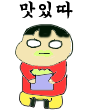
<style>
.page{position:relative;width:90px;height:110px;background:#ffffff}
.page>*{position:absolute;margin:0}
.t1{font:18px "H2gsrB";color:#000000;font-weight:bold}
</style>
<div class="page">
<p class="t1" style="left:19px;top:1px;width:54px;height:18px">맛있따</p>
</div>
